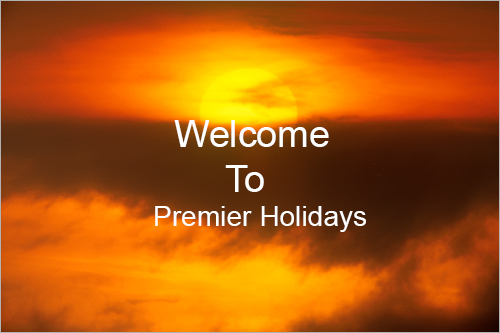
<style>
.page{position:relative;width:500px;height:333px}
.page>*{position:absolute;margin:0}
.t1{font:37.5px "ArialMT";color:#fefefe}
.t2{font:28.1px "ArialMT";color:#fefefe}
</style>
<div class="page">
<p class="t1" style="left:155px;top:120px;width:211px;height:112px">Welcome <br>       To <br><span class="t2">Premier Holidays</span></p>
</div>
